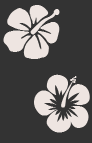
<style>
.page{position:relative;width:92px;height:143px;background:#333333}
.page>*{position:absolute;margin:0}
.t1{font:60px "Hibiscus";color:#eee5e1}
.t2{font:60px "Hibiscus";color:#eeded6}
</style>
<div class="page">
<p class="t1" style="left:3px;top:5px;width:87px;height:128px"><span class="t2"><br></span>a<br> n</p>
</div>
